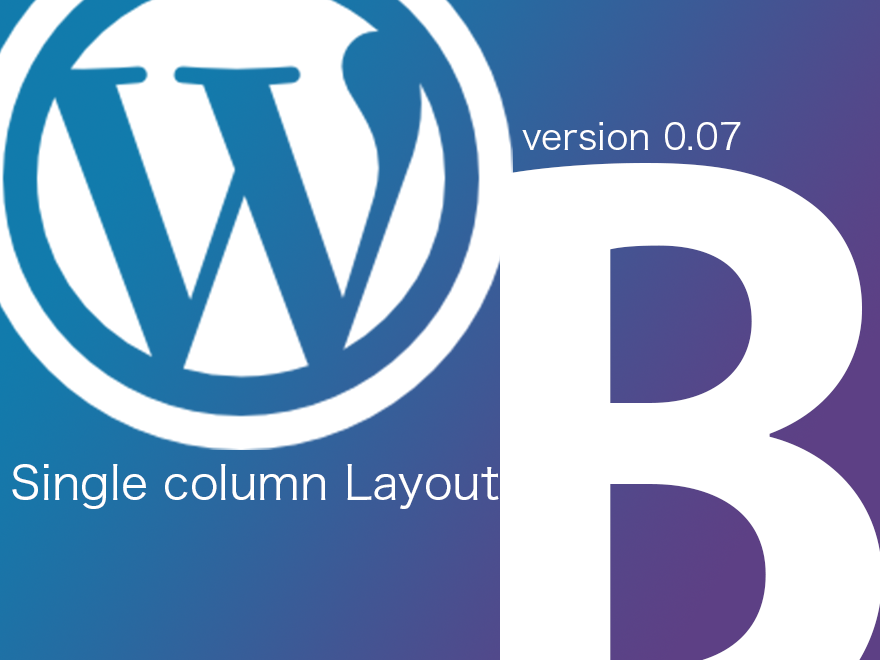
<style>
.page{position:relative;width:880px;height:660px;background:#ffffff}
.page>*{position:absolute;margin:0}
.t1{font:36px "HiraKakuProN-W3";color:#ffffff}
.t2{font:46px "HiraKakuPro-W3";color:#ffffff}
</style>
<div class="page">
<p class="t1" style="left:522px;top:121px;width:219px;height:29px">version 0.07</p>
<p class="t2" style="left:12px;top:464px;width:487px;height:45px">Single column Layout</p>
</div>
